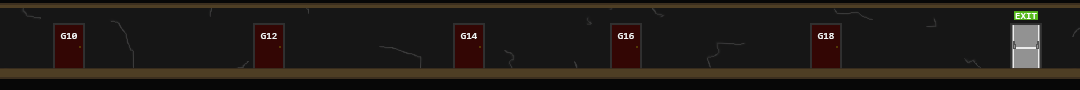
<style>
.page{position:relative;width:1080px;height:90px;background:#161616}
.page>*{position:absolute;margin:0}
.t1{font:10px "Consolas";color:#ffffff}
.t2{font:10px "Consolas";color:#f2f2f2}
</style>
<div class="page">
<p class="t1" style="left:1015px;top:13px;width:22px;height:6px">EXIT</p>
<p class="t2" style="left:60px;top:33px;width:17px;height:6px">G10</p>
<p class="t2" style="left:260px;top:33px;width:17px;height:6px">G12</p>
<p class="t2" style="left:460px;top:33px;width:17px;height:6px">G14</p>
<p class="t2" style="left:617px;top:33px;width:17px;height:6px">G16</p>
<p class="t2" style="left:817px;top:33px;width:17px;height:6px">G18</p>
</div>
